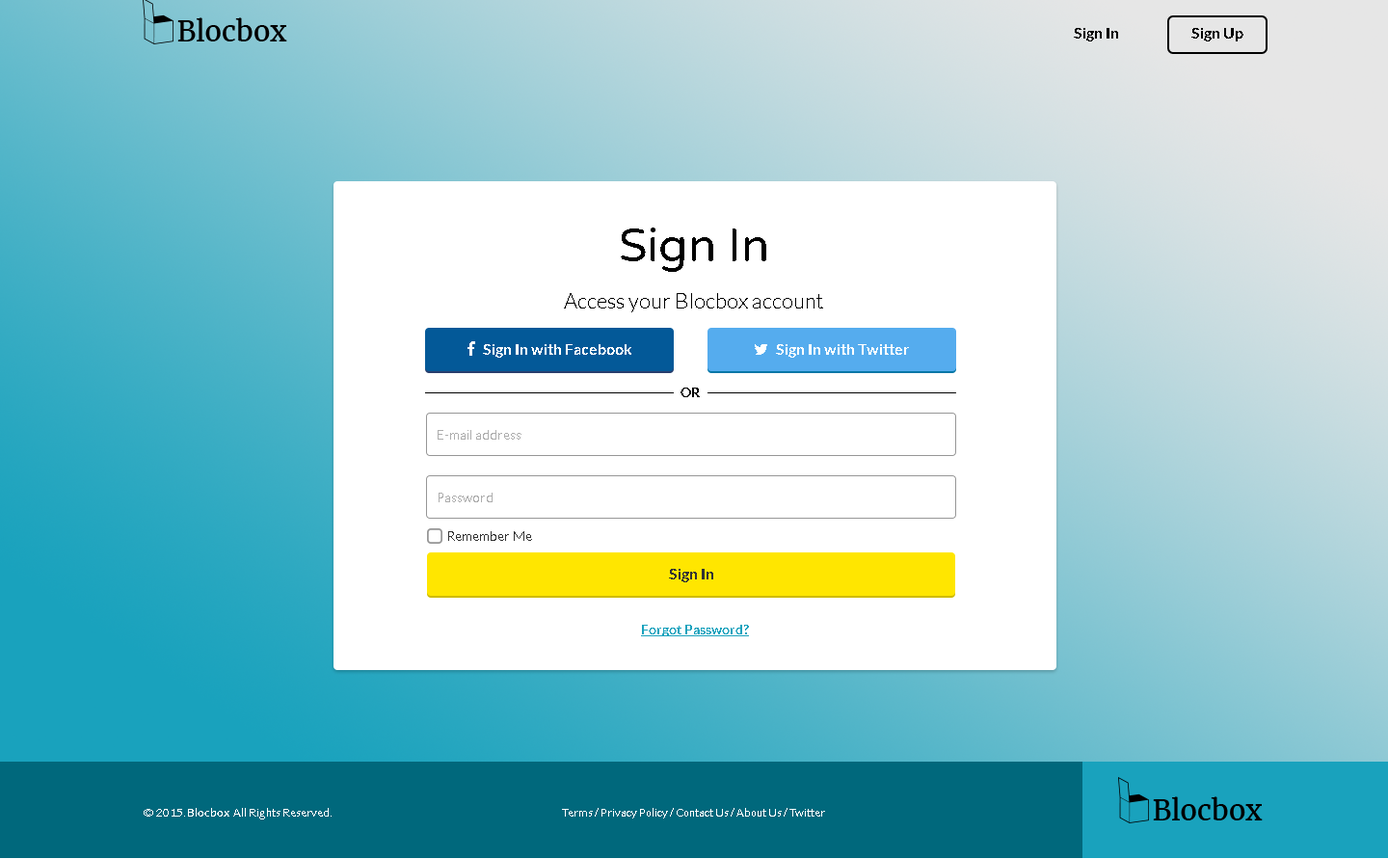
<style>
.page{position:relative;width:1388px;height:859px;background:#ffffff}
.page>*{position:absolute;margin:0}
.t1{font:15.4px "Lato-Bold";color:#000000}
.t2{font:46.3px "VarelaRound-Regular";color:#000000}
.t3{font:21.2px "Lato-Light";color:#000000}
.t4{font:13.5px "Lato-Bold";color:#000000}
.t5{font:13.5px "Lato-Light";color:#adadad}
.t6{font:13.5px "Lato-Light";color:#333333}
.t7{font:15.4px "Lato-Bold";color:#333333}
.t8{font:13.5px "Lato-Bold";color:#19a2bd;text-decoration:underline}
.t9{font:11.6px "Lato-Light";color:#ffffff}
.t10{font:11.6px "Lato-Bold";color:#ffffff}
</style>
<div class="page">
<p class="t1" style="left:1074px;top:28px;width:44px;height:13px">Sign In</p>
<p class="t1" style="left:1192px;top:28px;width:52px;height:13px">Sign Up</p>
<p class="t2" style="left:621px;top:228px;width:145px;height:44px">Sign In</p>
<p class="t3" style="left:564px;top:293px;width:259px;height:19px">Access your Blocbox account</p>
<p class="t4" style="left:681px;top:388px;width:19px;height:9px">OR</p>
<p class="t5" style="left:438px;top:430px;width:84px;height:10px">E-mail address</p>
<p class="t5" style="left:439px;top:493px;width:54px;height:9px">Password</p>
<p class="t6" style="left:448px;top:531px;width:84px;height:10px">Remember Me</p>
<p class="t7" style="left:669px;top:569px;width:44px;height:13px">Sign In</p>
<p class="t8" style="left:641px;top:625px;width:108px;height:11px">Forgot Password?</p>
<p class="t9" style="left:144px;top:808px;width:188px;height:11px">© 2015. <span class="t10">Blocbox </span>­ All Rights Reserved.</p>
<p class="t9" style="left:562px;top:808px;width:263px;height:10px">Terms / Privacy Policy / Contact Us / About Us / Twitter</p>
</div>
